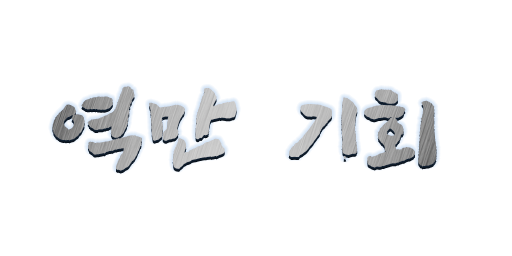
<style>
.page{position:relative;width:512px;height:256px;background:#ffffff}
.page>*{position:absolute;margin:0}
.t1{font:93px "SangSangRockOTF";letter-spacing:0.06em;font-weight:bold}
</style>
<div class="page">
<p class="t1" style="left:52px;top:86px;width:385px;height:85px">역만 기회</p>
</div>
